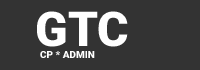
<style>
.page{position:relative;width:200px;height:70px;background:#333333}
.page>*{position:absolute;margin:0}
.t1{font:10px "Roboto-Black";color:#ffffff}
.t2{font:48px "Roboto-Black";color:#ffffff}
</style>
<div class="page">
<p class="t1" style="left:37px;top:11px;width:91px;height:47px"><span class="t2">GTC</span> <br>  CP * ADMIN</p>
</div>
